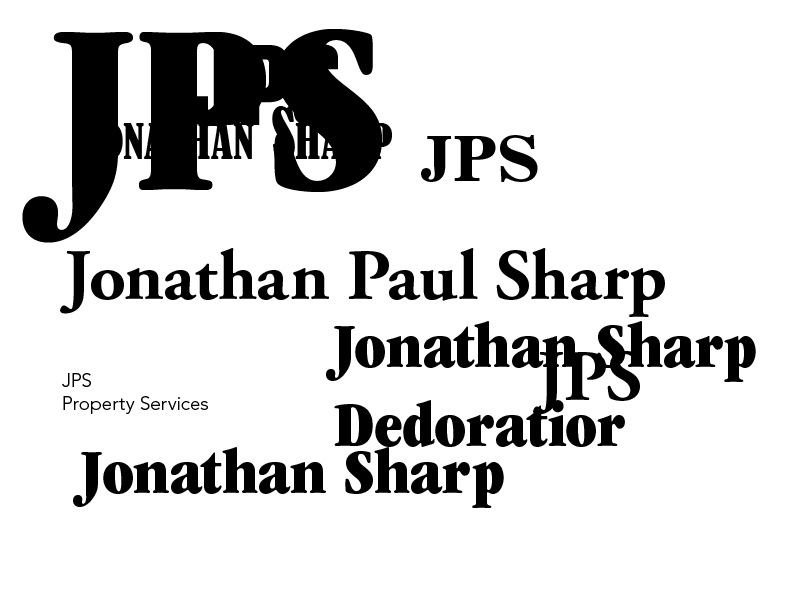
<style>
.page{position:relative;width:800px;height:600px;background:#ffffff}
.page>*{position:absolute;margin:0}
.t1{font:249.5px "ITCGaramondStd-UltCond";color:#000000}
.t2{font:110.1px "EurostileLTStd-BoldCn";color:#000000}
.t3{font:65.7px "BernardMT-Condensed";color:#000000;font-variant:small-caps}
.t4{font:65.7px "ExcelsiorLTStd-Bold";color:#000000}
.t5{font:72px "AGaramondPro-Bold";color:#000000}
.t6{font:65.7px "ITCGaramondStd-UltCond";color:#000000}
.t7{font:19px "AvenirLTStd-Light";color:#000000}
</style>
<div class="page">
<p class="t1" style="left:22px;top:29px;width:360px;height:214px">JPS</p>
<p class="t2" style="left:191px;top:43px;width:149px;height:84px">JPS</p>
<p class="t3" style="left:77px;top:106px;width:315px;height:61px">Jonathan Sharp</p>
<p class="t4" style="left:421px;top:135px;width:117px;height:47px">JPS</p>
<p class="t5" style="left:60px;top:248px;width:605px;height:69px">Jonathan Paul Sharp</p>
<p class="t6" style="left:326px;top:321px;width:430px;height:126px">Jonathan Sharp<br>Dedoratior</p>
<p class="t5" style="left:533px;top:351px;width:107px;height:64px">JPS</p>
<p class="t7" style="left:62px;top:373px;width:146px;height:41px">JPS<br>Property Services</p>
<p class="t6" style="left:73px;top:447px;width:431px;height:61px">Jonathan Sharp</p>
</div>
